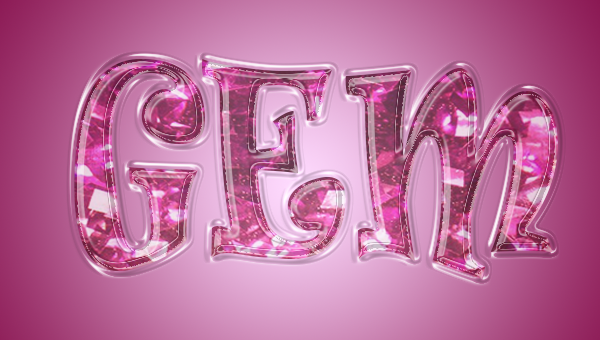
<style>
.page{position:relative;width:600px;height:340px}
.page>*{position:absolute;margin:0}
.t1{font:248px "Ravie";text-transform:uppercase;scale:0.68 1}
</style>
<div class="page">
<p class="t1" style="left:74px;top:59px;width:484px;height:220px">gem</p>
</div>
